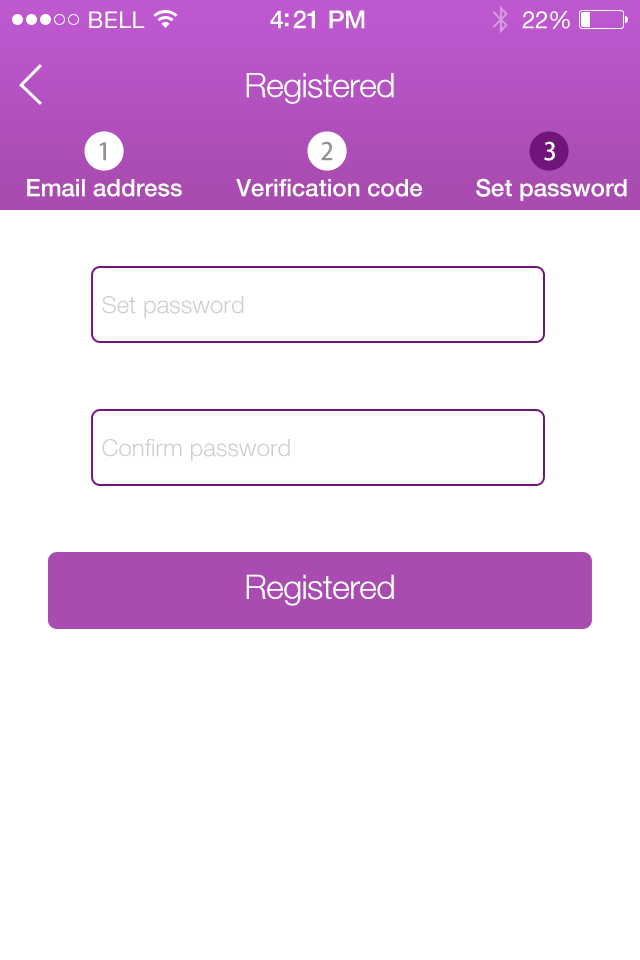
<style>
.page{position:relative;width:640px;height:960px;background:#ffffff}
.page>*{position:absolute;margin:0}
.t1{font:34px "HelveticaNeueLT-Light";letter-spacing:-0.02em;color:#ffffff}
.t2{font:24px "AdobeHeitiStd-Regular";color:#929292}
.t3{font:24px "AdobeHeitiStd-Regular";color:#ffffff}
.t4{font:24px "HelveticaNeueLT-Medium";color:#ffffff}
.t5{font:24px "HelveticaNeueLT-Light";color:#cecece}
</style>
<div class="page">
<p class="t1" style="left:246px;top:73px;width:148px;height:31px">Registered</p>
<p class="t2" style="left:99px;top:142px;width:7px;height:19px">1</p>
<p class="t2" style="left:321px;top:141px;width:12px;height:20px">2</p>
<p class="t3" style="left:544px;top:141px;width:11px;height:20px">3</p>
<p class="t4" style="left:27px;top:179px;width:155px;height:18px">Email address</p>
<p class="t4" style="left:236px;top:179px;width:186px;height:18px">Verification code</p>
<p class="t4" style="left:476px;top:178px;width:151px;height:23px">Set password</p>
<p class="t5" style="left:102px;top:296px;width:142px;height:22px">Set password</p>
<p class="t5" style="left:102px;top:439px;width:188px;height:22px">Confirm password</p>
<p class="t1" style="left:246px;top:574px;width:148px;height:32px">Registered</p>
</div>
